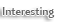
<style>
.page{position:relative;width:57px;height:22px;background:#ffffff}
.page>*{position:absolute;margin:0}
.t1{font:11px "AmiraParadiso";color:#666666}
</style>
<div class="page">
<p class="t1" style="left:2px;top:7px;width:53px;height:11px">Interesting</p>
</div>
